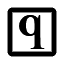
<style>
.page{position:relative;width:64px;height:64px;background:#ffffff}
.page>*{position:absolute;margin:0}
.t1{font:49.4px "BellMTBold";color:#000000}
</style>
<div class="page">
<p class="t1" style="left:19px;top:15px;width:26px;height:34px">q</p>
</div>
